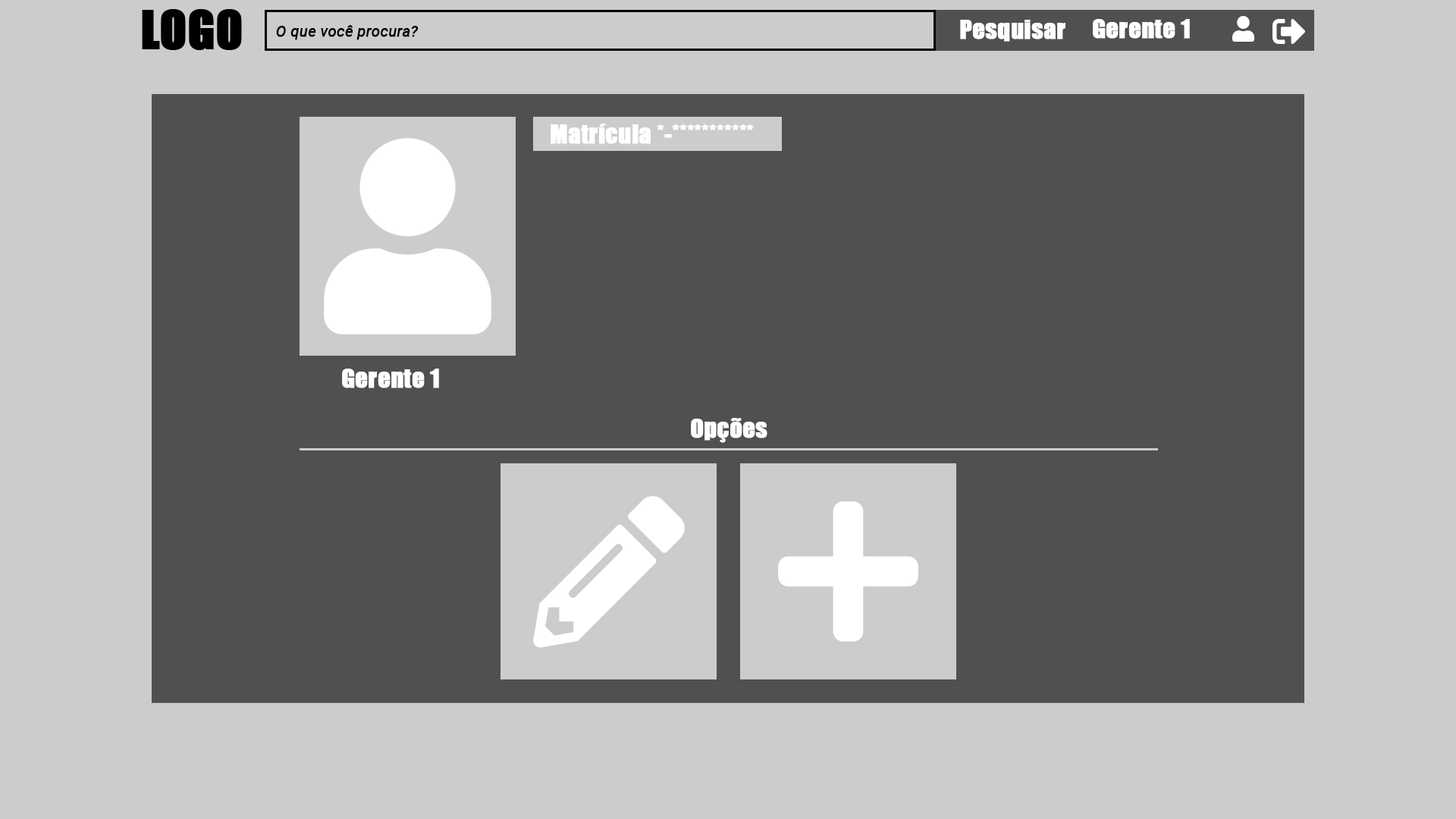
<style>
.page{position:relative;width:1456px;height:819px;background:#cccccc}
.page>*{position:absolute;margin:0}
.t1{font:15.2px "Roboto-Italic";color:#000000;font-weight:bold}
.t2{font:24.3px "Impact";color:#ffffff;font-weight:bold}
</style>
<div class="page">
<p class="t1" style="left:276px;top:25px;width:143px;height:15px">O que você procura?</p>
<p class="t2" style="left:960px;top:20px;width:105px;height:22px">Pesquisar</p>
<p class="t2" style="left:1093px;top:19px;width:97px;height:20px">Gerente 1</p>
<p class="t2" style="left:551px;top:124px;width:203px;height:20px">Matrícula *-***********</p>
<p class="t2" style="left:342px;top:369px;width:97px;height:19px">Gerente 1</p>
<p class="t2" style="left:691px;top:418px;width:76px;height:25px">Opções</p>
</div>
